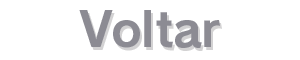
<style>
.page{position:relative;width:300px;height:60px;background:#ffffff}
.page>*{position:absolute;margin:0}
.t1{font:48px "RodinPro-B";letter-spacing:-0.016em;color:#8c8b93}
</style>
<div class="page">
<p class="t1" style="left:79px;top:10px;width:141px;height:38px">Voltar</p>
</div>
